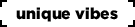
<style>
.page{position:relative;width:135px;height:27px;background:#ffffff}
.page>*{position:absolute;margin:0}
.t1{font:15.7px "Gotham-Black";color:#000000}
</style>
<div class="page">
<p class="t1" style="left:16px;top:7px;width:102px;height:15px">unique vibes</p>
</div>
